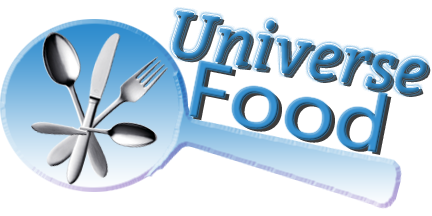
<style>
.page{position:relative;width:432px;height:216px;background:#ffffff}
.page>*{position:absolute;margin:0}
.t1{font:64.3px "Bitter-Italic"}
.t2{font:73.9px "MicrosoftYaHei";color:#3690cf;scale:1.14 1}
</style>
<div class="page">
<p class="t1" style="left:172px;top:10px;width:255px;height:83px;rotate:9deg">Universe</p>
<p class="t2" style="left:189px;top:60px;width:199px;height:92px;rotate:11deg">Food</p>
</div>
